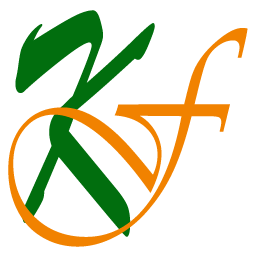
<style>
.page{position:relative;width:256px;height:256px;background:#ffffff}
.page>*{position:absolute;margin:0}
.t1{font:335.2px "STXingkai";letter-spacing:0.1em;color:#016e0e;font-weight:bold;scale:0.56 1}
.t2{font:230.8px "Vivaldii";letter-spacing:0.1em;color:#f18200;font-weight:bold;scale:0.82 1}
</style>
<div class="page">
<p class="t1" style="left:15px;top:10px;width:140px;height:227px">K</p>
<p class="t2" style="left:8px;top:28px;width:240px;height:219px">F</p>
</div>
